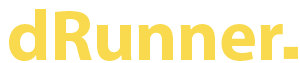
<style>
.page{position:relative;width:300px;height:63px;background:#ffffff}
.page>*{position:absolute;margin:0}
.t1{font:72px "MyriadPro-Bold";color:#f9da4f}
</style>
<div class="page">
<p class="t1" style="left:9px;top:9px;width:274px;height:52px">dRunner</p>
</div>
